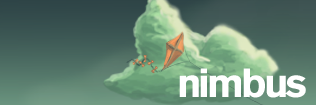
<style>
.page{position:relative;width:316px;height:105px}
.page>*{position:absolute;margin:0}
.t1{font:40px "AkzidenzGrotesk-Black";letter-spacing:-0.075em;color:#ffffff}
</style>
<div class="page">
<p class="t1" style="left:179px;top:68px;width:127px;height:30px">nimbus</p>
</div>
